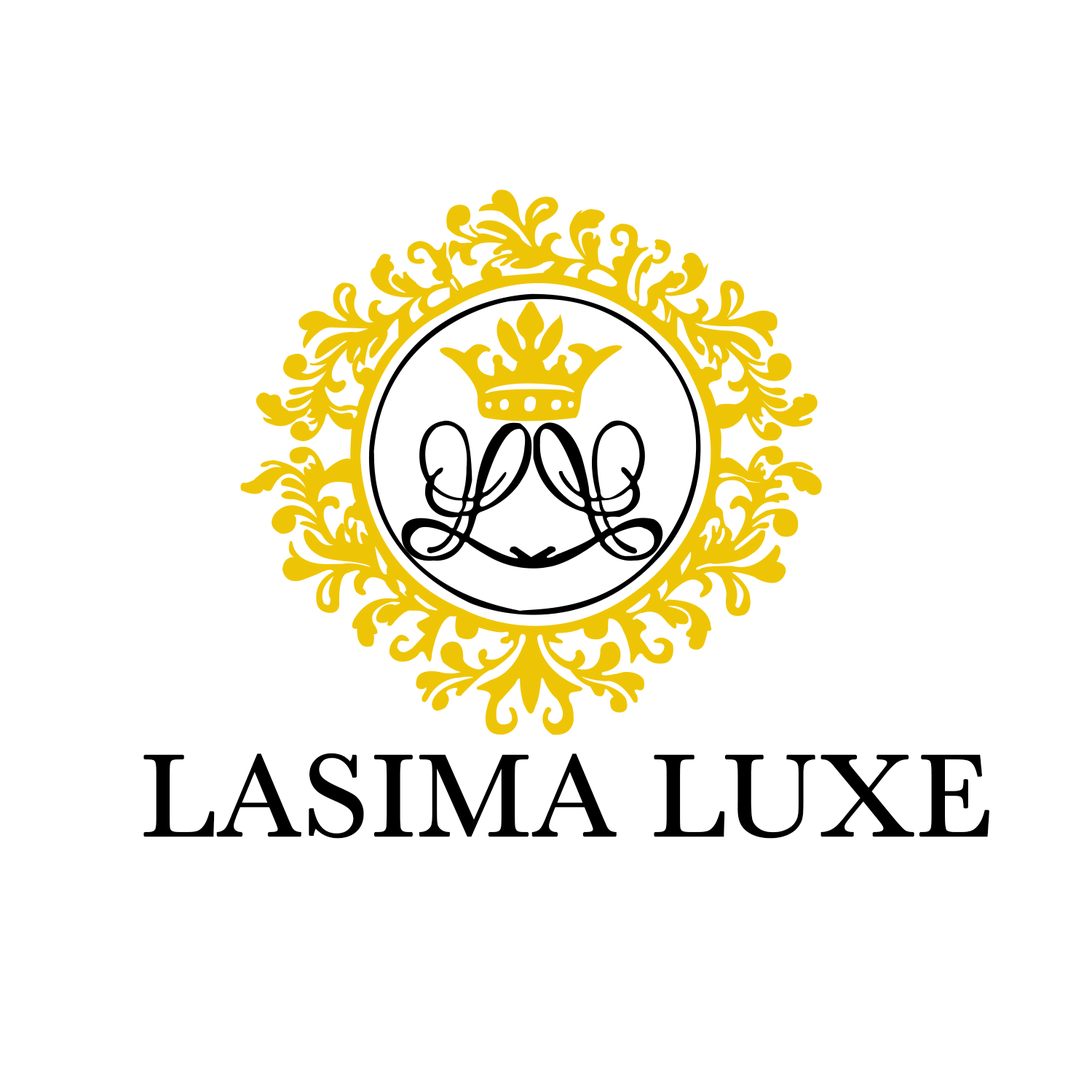
<style>
.page{position:relative;width:1092px;height:1092px;background:#ffffff}
.page>*{position:absolute;margin:0}
.t1{font:120.9px "Baskerville";color:#000000;text-transform:uppercase;font-weight:bold}
</style>
<div class="page">
<p class="t1" style="left:143px;top:753px;width:846px;height:86px">LASIMA LUXE</p>
</div>
